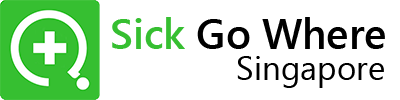
<style>
.page{position:relative;width:400px;height:100px;background:#ffffff}
.page>*{position:absolute;margin:0}
.t1{font:41.7px "SegoeUI-Semibold";color:#000000}
.t2{font:41.7px "SegoeUI-Semibold";color:#36bf31}
.t3{font:33.3px "SegoeUI";color:#000000}
</style>
<div class="page">
<p class="t1" style="left:112px;top:17px;width:273px;height:32px"><span class="t2">Sick</span> Go Where</p>
<p class="t3" style="left:237px;top:56px;width:147px;height:32px">Singapore</p>
</div>
